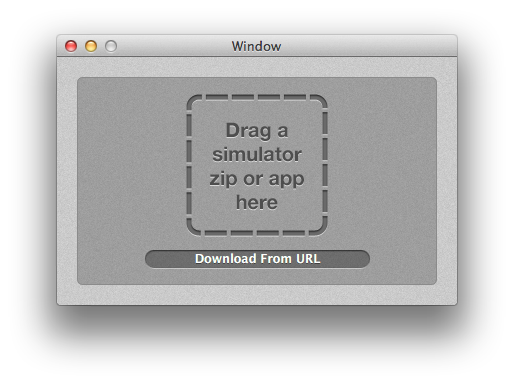
<style>
.page{position:relative;width:514px;height:384px}
.page>*{position:absolute;margin:0}
.t1{font:20px "HelveticaNeue-Bold";color:#4e4e4e}
</style>
<div class="page">
<p class="t1" style="left:210px;top:122px;width:94px;height:88px;text-align:center">Drag a<br>simulator<br>zip or app<br>here</p>
</div>
